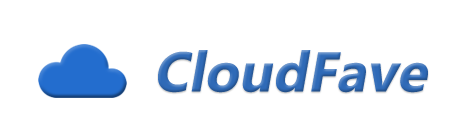
<style>
.page{position:relative;width:454px;height:140px;background:#ffffff}
.page>*{position:absolute;margin:0}
.t1{font:56px "Gadugi-Bold";color:#2f6ab7;font-style:italic}
</style>
<div class="page">
<p class="t1" style="left:158px;top:50px;width:270px;height:43px">CloudFave</p>
</div>
